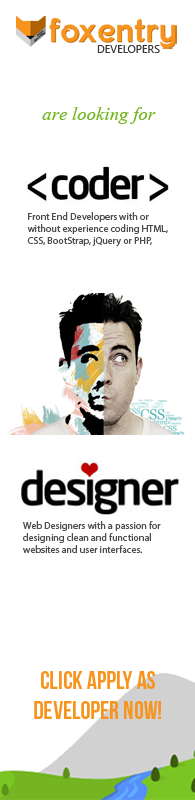
<style>
.page{position:relative;width:195px;height:800px;background:#ffffff}
.page>*{position:absolute;margin:0}
.t1{font:11px "SegoeUI";color:#383838;text-transform:uppercase}
.t2{font:23.4px "Vijaya";color:#74b521}
.t3{font:10px "MyriadPro-Regular";color:#4d4d4d}
.t4{font:25px "BebasNeue";color:#f7941d}
</style>
<div class="page">
<p class="t1" style="left:97px;top:45px;width:63px;height:8px">developers</p>
<p class="t2" style="left:42px;top:107px;width:114px;height:17px">are looking for</p>
<p class="t3" style="left:27px;top:212px;width:141px;height:35px">Front End Developers with or without experience coding HTML, CSS, BootStrap, jQuery or PHP,</p>
<p class="t3" style="left:23px;top:521px;width:138px;height:32px">Web Designers with a passion for<br>designing clean and functional<br>websites and user interfaces.</p>
<p class="t4" style="left:34px;top:671px;width:127px;height:48px;text-align:center">Click apply as<br>developer now!</p>
</div>
